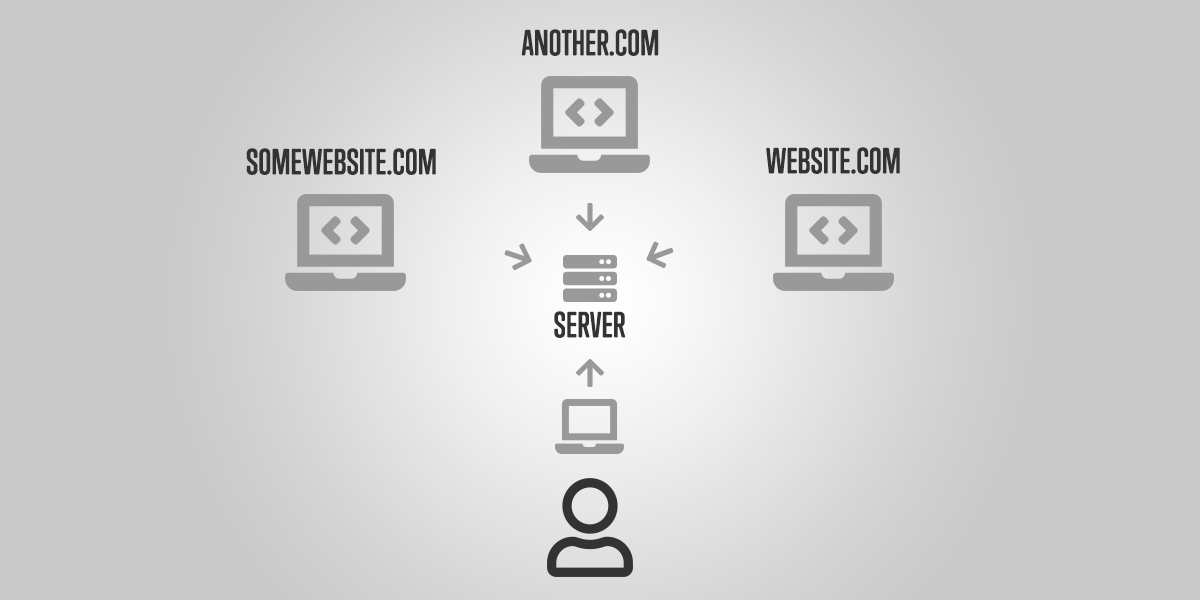
<style>
.page{position:relative;width:1200px;height:600px;background:#c9c9c9}
.page>*{position:absolute;margin:0}
.t1{font:33.3px "TrumpSoftPro-Bold";color:#333333;text-transform:uppercase}
</style>
<div class="page">
<p class="t1" style="left:521px;top:29px;width:138px;height:27px">Another.com</p>
<p class="t1" style="left:246px;top:148px;width:190px;height:27px">somewebsite.com</p>
<p class="t1" style="left:766px;top:147px;width:134px;height:27px">Website.com</p>
<p class="t1" style="left:554px;top:311px;width:72px;height:27px">Server</p>
</div>
